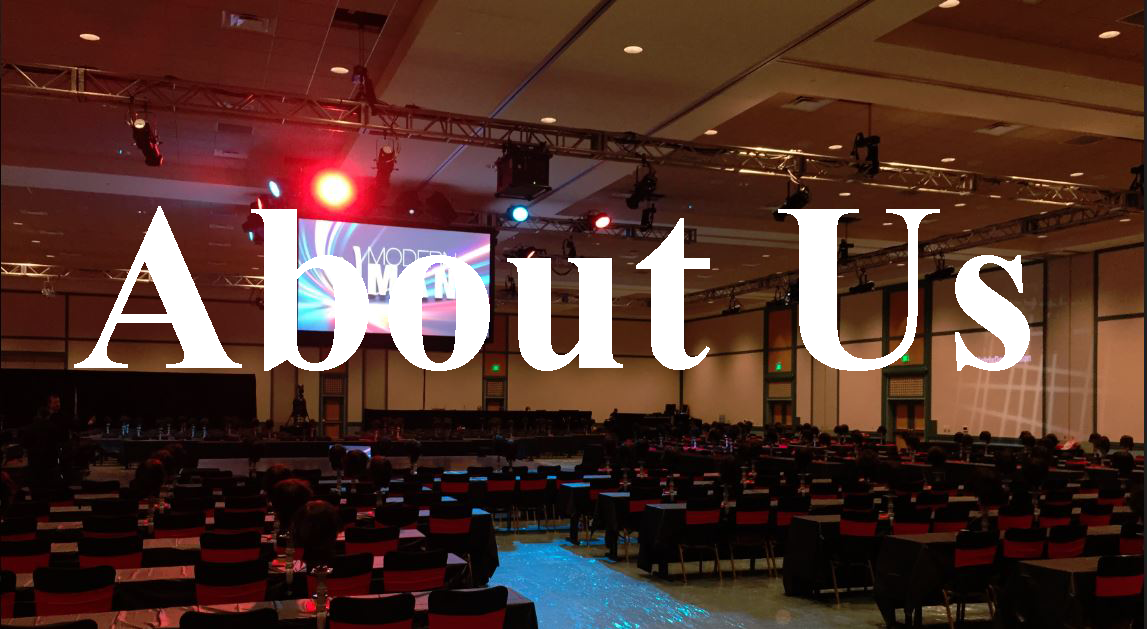
<style>
.page{position:relative;width:1147px;height:629px}
.page>*{position:absolute;margin:0}
.t1{font:240px "TimesNewRomanPS-BoldMT";color:#ffffff}
</style>
<div class="page">
<p class="t1" style="left:74px;top:206px;width:956px;height:165px">About Us</p>
</div>
